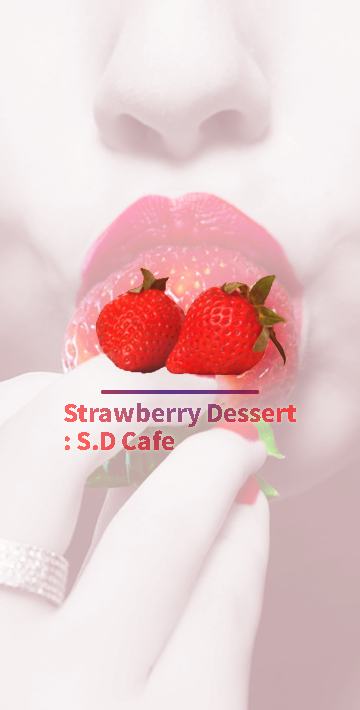
<style>
.page{position:relative;width:360px;height:710px}
.page>*{position:absolute;margin:0}
.t1{font:24px/28px "NotoSansKR-Black"}
</style>
<div class="page">
<p class="t1" style="left:64px;top:403px;width:232px;height:47px">Strawberry Dessert <br>: S.D Cafe</p>
</div>
